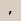
<style>
.page{position:relative;width:21px;height:21px;background:#d9cdc1}
.page>*{position:absolute;margin:0}
.t1{font:9px "Tahoma-Bold";color:#000000}
</style>
<div class="page">
<p class="t1" style="left:9px;top:11px;width:3px;height:4px">,</p>
</div>
